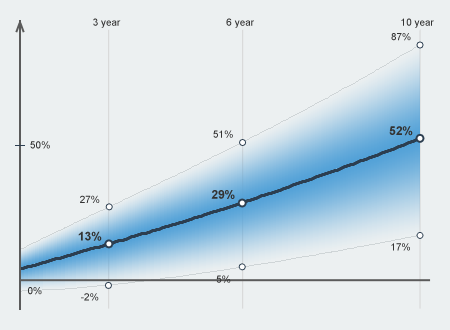
<style>
.page{position:relative;width:450px;height:330px;background:#ecf0f1}
.page>*{position:absolute;margin:0}
.t1{font:10px "ArialMT";color:#333333}
.t2{font:12px "Arial-BoldMT";color:#333333}
</style>
<div class="page">
<p class="t1" style="left:93px;top:18px;width:28px;height:10px">3 year</p>
<p class="t1" style="left:226px;top:18px;width:28px;height:10px">6 year</p>
<p class="t1" style="left:401px;top:18px;width:33px;height:10px">10 year</p>
<p class="t1" style="left:391px;top:33px;width:20px;height:8px">87%</p>
<p class="t2" style="left:389px;top:126px;width:24px;height:10px">52%</p>
<p class="t1" style="left:213px;top:130px;width:20px;height:8px">51%</p>
<p class="t1" style="left:30px;top:141px;width:20px;height:8px">50%</p>
<p class="t1" style="left:80px;top:195px;width:20px;height:8px">27%</p>
<p class="t2" style="left:211px;top:190px;width:24px;height:9px">29%</p>
<p class="t2" style="left:78px;top:231px;width:24px;height:10px">13%</p>
<p class="t1" style="left:391px;top:243px;width:19px;height:8px">17%</p>
<p class="t1" style="left:216px;top:275px;width:15px;height:8px">5%</p>
<p class="t1" style="left:28px;top:287px;width:14px;height:8px">0%</p>
<p class="t1" style="left:81px;top:293px;width:18px;height:8px">-2%</p>
</div>
